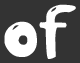
<style>
.page{position:relative;width:80px;height:63px;background:#333333}
.page>*{position:absolute;margin:0}
.t1{font:72px "Jetmix";color:#ffffff}
</style>
<div class="page">
<p class="t1" style="left:4px;top:4px;width:72px;height:55px">of</p>
</div>
